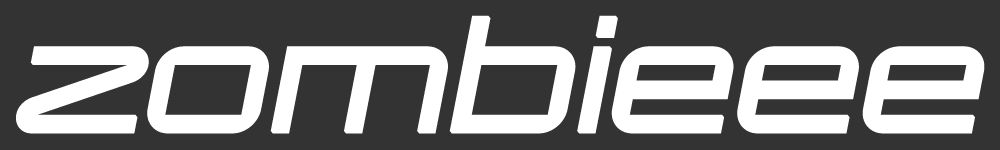
<style>
.page{position:relative;width:1000px;height:150px;background:#333333}
.page>*{position:absolute;margin:0}
.t1{font:150px "ChangelingNeo";color:#ffffff;font-weight:bold;font-style:italic}
</style>
<div class="page">
<p class="t1" style="left:16px;top:15px;width:969px;height:119px">Zombieee</p>
</div>
